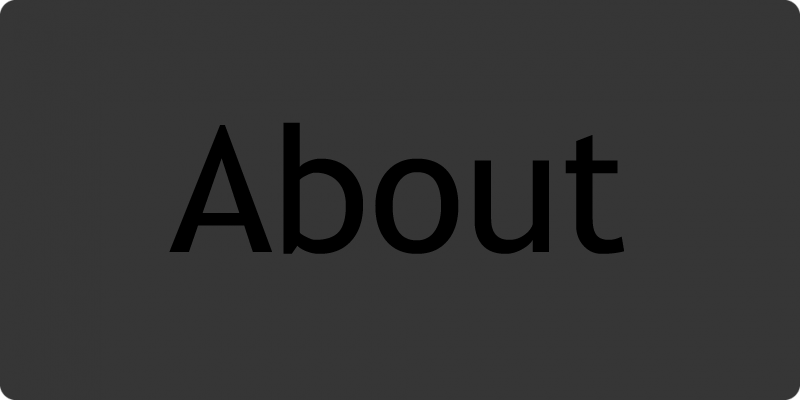
<style>
.page{position:relative;width:800px;height:400px;background:#363636}
.page>*{position:absolute;margin:0}
.t1{font:175px "TrebuchetMS";color:#000000}
</style>
<div class="page">
<p class="t1" style="left:169px;top:122px;width:455px;height:132px">About</p>
</div>
